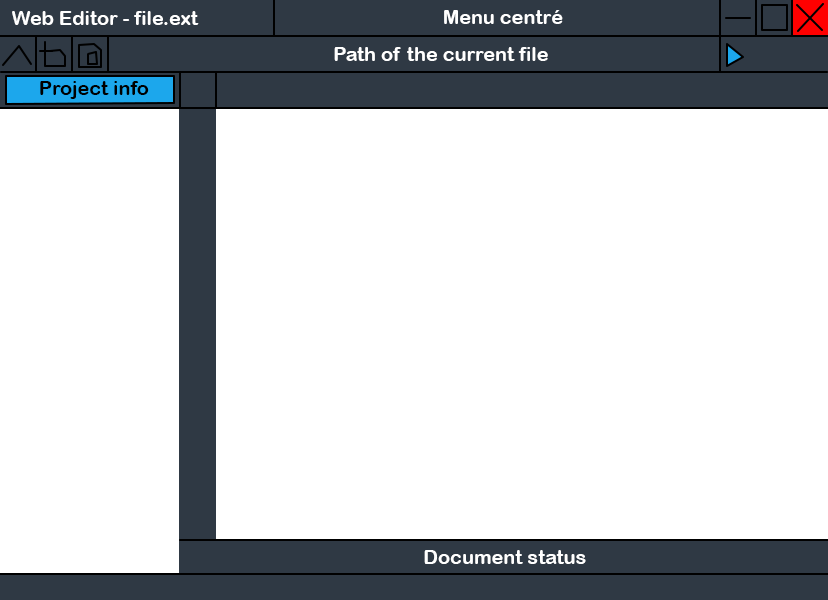
<style>
.page{position:relative;width:828px;height:600px;background:#ffffff}
.page>*{position:absolute;margin:0}
.t1{font:19.9px "ArialRoundedMTBold";color:#ffffff}
.t2{font:19.9px "ArialRoundedMTBold";color:#000000}
</style>
<div class="page">
<p class="t1" style="left:12px;top:11px;width:187px;height:14px">Web Editor - file.ext</p>
<p class="t1" style="left:444px;top:10px;width:119px;height:14px">Menu centré</p>
<p class="t1" style="left:334px;top:47px;width:214px;height:14px">Path of the current file</p>
<p class="t2" style="left:40px;top:81px;width:109px;height:18px">Project info</p>
<p class="t1" style="left:424px;top:550px;width:162px;height:14px">Document status</p>
</div>
